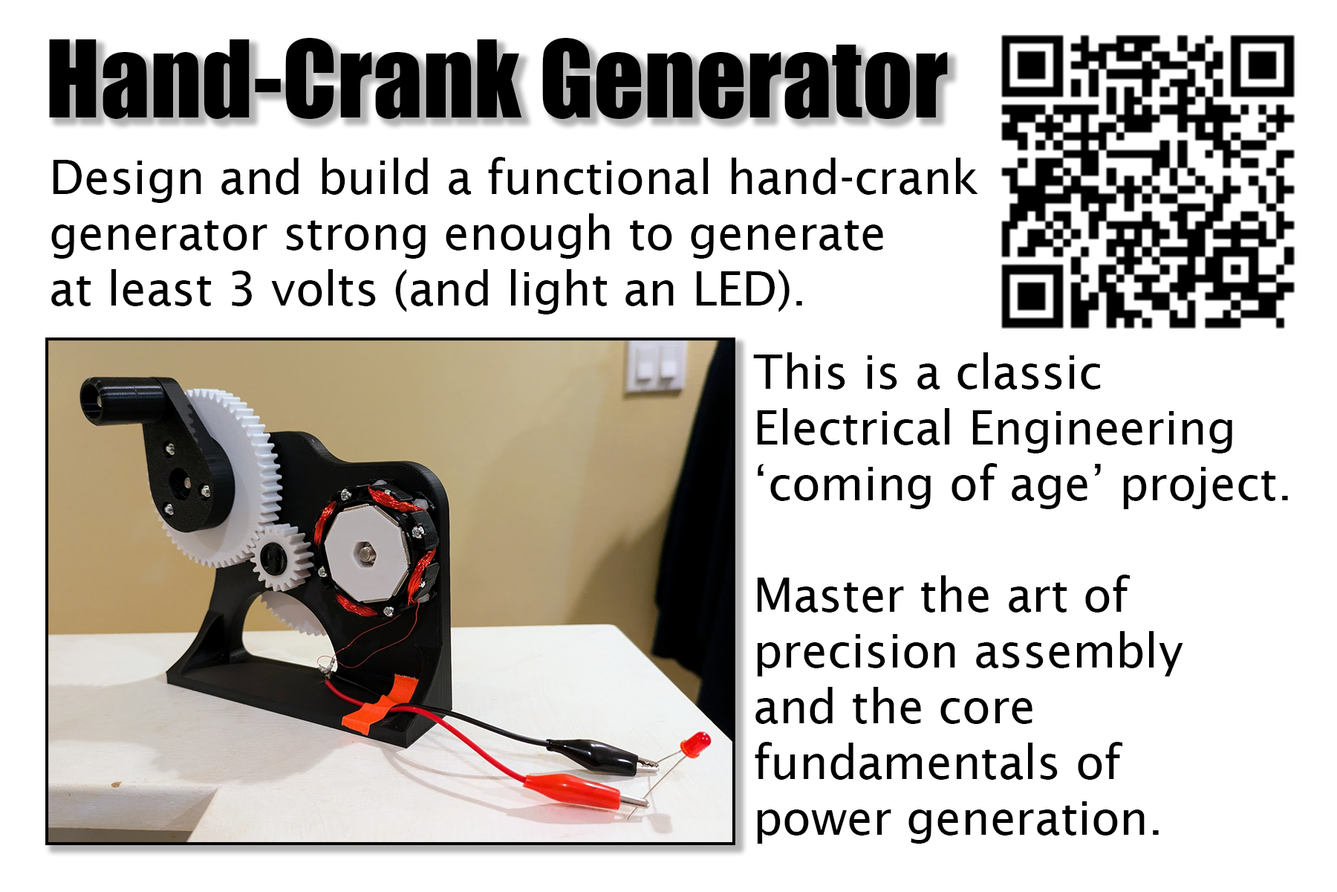
<style>
.page{position:relative;width:1337px;height:892px;background:#ffffff}
.page>*{position:absolute;margin:0}
.t1{font:99.1px "Impact";color:#000000}
.t2{font:46.4px "LucidaSans";color:#000000}
</style>
<div class="page">
<p class="t1" style="left:49px;top:38px;width:899px;height:81px">Hand-Crank Generator</p>
<p class="t2" style="left:51px;top:157px;width:928px;height:157px">Design and build a functional hand-crank<br>generator strong enough to generate <br>at least 3 volts (and light an LED).</p>
<p class="t2" style="left:753px;top:352px;width:535px;height:491px">This is a classic <br>Electrical Engineering <br>‘coming of age’ project.<br><br>Master the art of <br>precision assembly <br>and the core <br>fundamentals of <br>power generation.</p>
</div>
